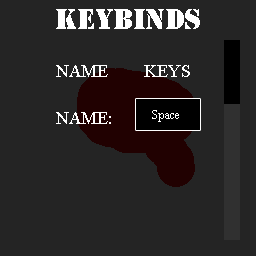
<style>
.page{position:relative;width:256px;height:256px;background:#242424}
.page>*{position:absolute;margin:0}
.t1{font:18px "TimesNewRomanPSMT";color:#ffffff}
.t2{font:12px "TimesNewRomanPSMT";color:#ffffff}
</style>
<div class="page">
<p class="t1" style="left:56px;top:65px;width:52px;height:12px">NAME</p>
<p class="t1" style="left:144px;top:65px;width:46px;height:12px">KEYS</p>
<p class="t1" style="left:56px;top:112px;width:55px;height:12px">NAME:</p>
<p class="t2" style="left:152px;top:110px;width:27px;height:12px">Space</p>
</div>
